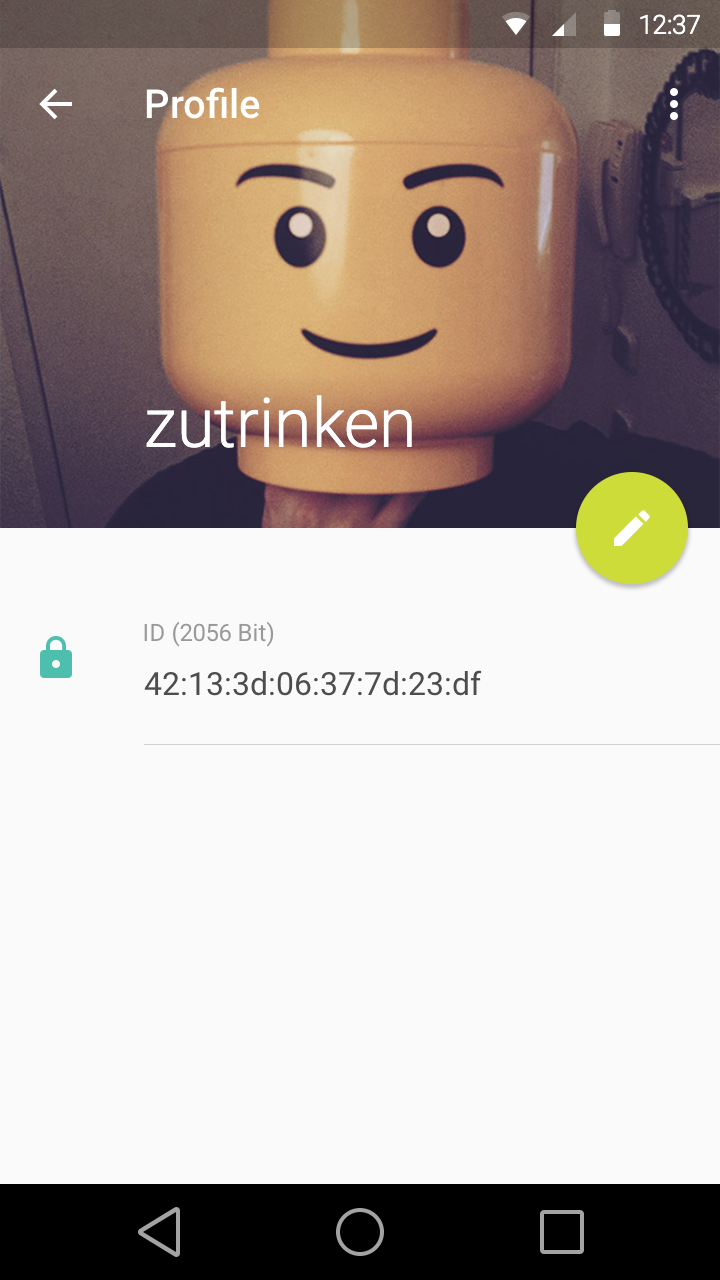
<style>
.page{position:relative;width:720px;height:1280px;background:#fafafa}
.page>*{position:absolute;margin:0}
.t1{font:26.1px "Roboto-Light";color:#ffffff}
.t2{font:40px "Roboto-Medium";color:#ffffff}
.t3{font:68px "Roboto-Light";color:#ffffff}
.t4{font:24px "Roboto-Regular";color:#999999}
.t5{font:32px "Roboto-Regular";color:#4d4d4d}
</style>
<div class="page">
<p class="t1" style="left:640px;top:14px;width:60px;height:21px">12:37</p>
<p class="t2" style="left:146px;top:87px;width:114px;height:32px">Profile</p>
<p class="t3" style="left:146px;top:395px;width:266px;height:53px">zutrinken</p>
<p class="t4" style="left:144px;top:621px;width:130px;height:26px">ID (2056 Bit)</p>
<p class="t5" style="left:144px;top:670px;width:338px;height:26px">42:13:3d:06:37:7d:23:df</p>
</div>
